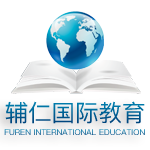
<style>
.page{position:relative;width:150px;height:150px;background:#ffffff}
.page>*{position:absolute;margin:0}
.t1{font:23.5px "PingFangSC-Regular";text-transform:uppercase}
.t2{font:8px "PingFangSC-Regular";text-transform:uppercase}
</style>
<div class="page">
<p class="t1" style="left:5px;top:101px;width:140px;height:23px">辅仁国际教育</p>
<p class="t2" style="left:4px;top:129px;width:141px;height:6px">FUREN international education</p>
</div>
